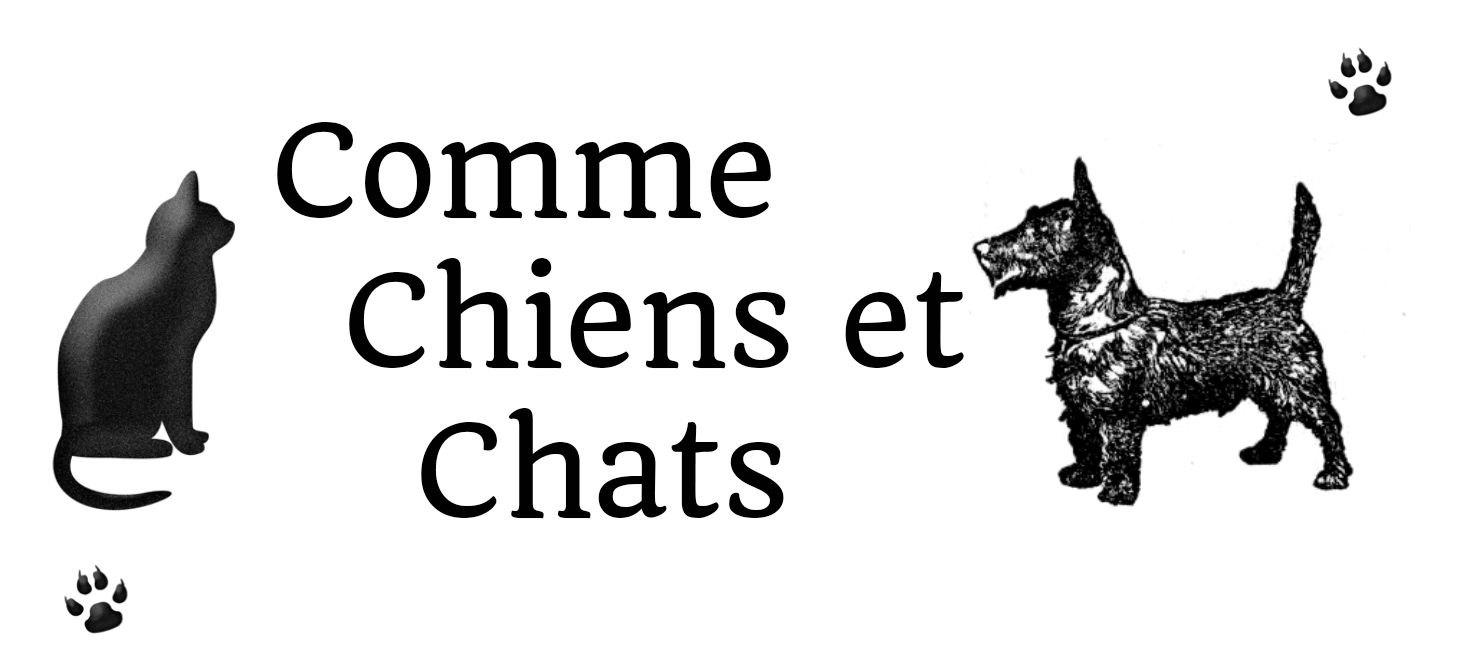
<style>
.page{position:relative;width:1462px;height:659px;background:#ffffff}
.page>*{position:absolute;margin:0}
.t1{font:125px "Quando-Regular";color:#010101}
</style>
<div class="page">
<p class="t1" style="left:277px;top:122px;width:687px;height:397px">Comme<br>  Chiens et<br>    Chats</p>
</div>
